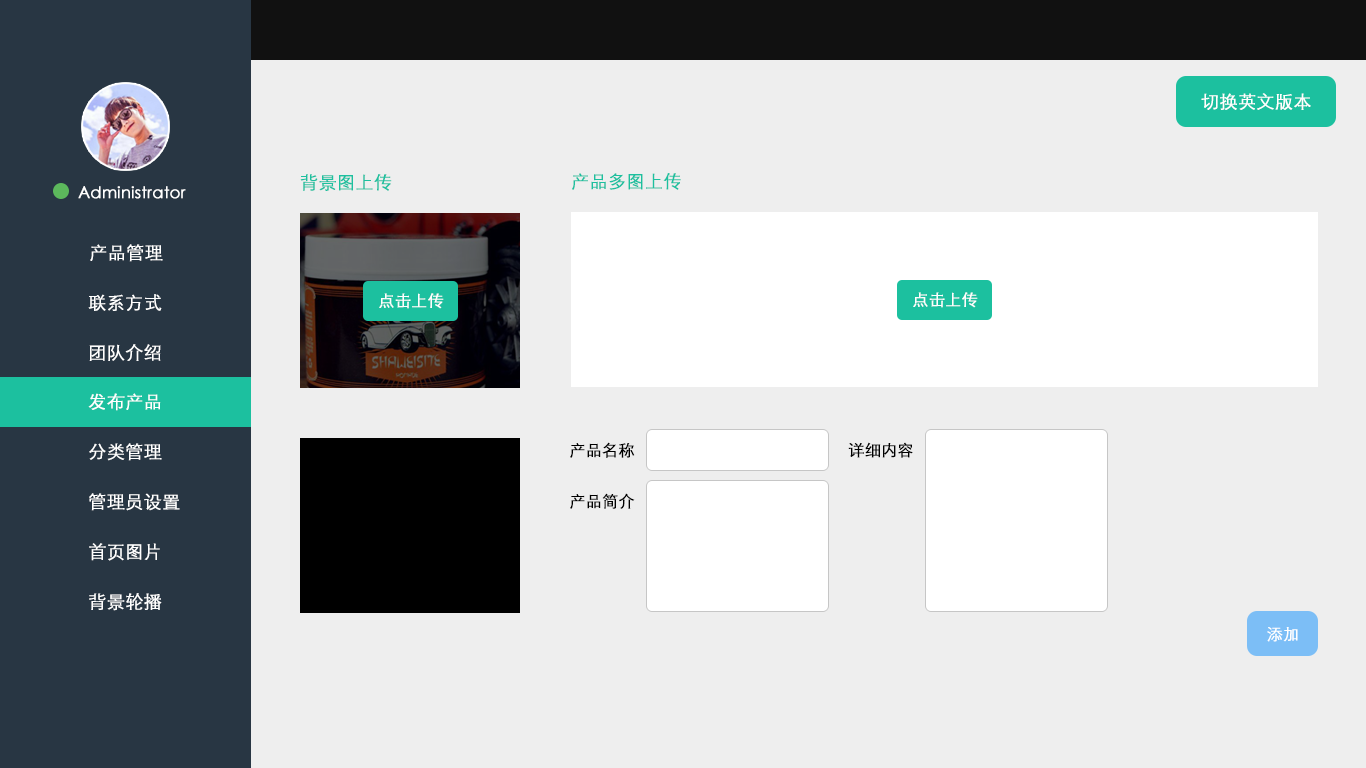
<style>
.page{position:relative;width:1366px;height:768px;background:#eeeeee}
.page>*{position:absolute;margin:0}
.t1{font:18px "STXihei";color:#ffffff;font-weight:bold}
.t2{font:18px "STXihei";color:#1cc09f;font-weight:bold}
.t3{font:16px "STXihei";color:#ffffff;font-weight:bold}
.t4{font:16px "STXihei";color:#fefefe;font-weight:bold}
.t5{font:16px "STXihei";color:#000000;font-weight:bold}
</style>
<div class="page">
<p class="t1" style="left:1201px;top:93px;width:110px;height:17px">切换英文版本</p>
<p class="t2" style="left:300px;top:174px;width:92px;height:17px">背景图上传</p>
<p class="t2" style="left:572px;top:173px;width:109px;height:17px">产品多图上传</p>
<p class="t3" style="left:78px;top:186px;width:108px;height:13px">Administrator</p>
<p class="t1" style="left:90px;top:244px;width:73px;height:18px">产品管理</p>
<p class="t1" style="left:88px;top:294px;width:74px;height:17px">联系方式</p>
<p class="t4" style="left:379px;top:293px;width:65px;height:16px">点击上传</p>
<p class="t4" style="left:913px;top:292px;width:65px;height:16px">点击上传</p>
<p class="t1" style="left:89px;top:344px;width:72px;height:17px">团队介绍</p>
<p class="t1" style="left:88px;top:393px;width:73px;height:18px">发布产品</p>
<p class="t1" style="left:89px;top:443px;width:73px;height:18px">分类管理</p>
<p class="t5" style="left:570px;top:442px;width:65px;height:16px">产品名称</p>
<p class="t5" style="left:848px;top:442px;width:65px;height:16px">详细内容</p>
<p class="t1" style="left:89px;top:493px;width:91px;height:18px">管理员设置</p>
<p class="t5" style="left:570px;top:493px;width:65px;height:16px">产品简介</p>
<p class="t1" style="left:89px;top:543px;width:71px;height:18px">首页图片</p>
<p class="t1" style="left:89px;top:593px;width:73px;height:18px">背景轮播</p>
<p class="t3" style="left:1267px;top:627px;width:31px;height:15px">添加</p>
</div>
